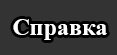
<style>
.page{position:relative;width:117px;height:55px;background:#333333}
.page>*{position:absolute;margin:0}
.t1{font:24px "TimesNewRomanPS-BoldMT";color:#ffffff}
</style>
<div class="page">
<p class="t1" style="left:13px;top:19px;width:94px;height:21px">Справка</p>
</div>
